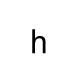
<style>
.page{position:relative;width:80px;height:80px;background:#ffffff}
.page>*{position:absolute;margin:0}
.t1{font:31.8px "DroidSans";color:#000000}
</style>
<div class="page">
<p class="t1" style="left:32px;top:29px;width:14px;height:25px">h</p>
</div>
